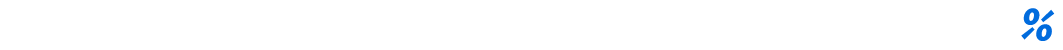
<style>
.page{position:relative;width:1063px;height:50px;background:#ffffff}
.page>*{position:absolute;margin:0}
.t1{font:50px "SourceCodePro-Black";letter-spacing:0.2em;color:#006bdd}
</style>
<div class="page">
<p class="t1" style="left:1021px;top:8px;width:34px;height:33px">%</p>
</div>
